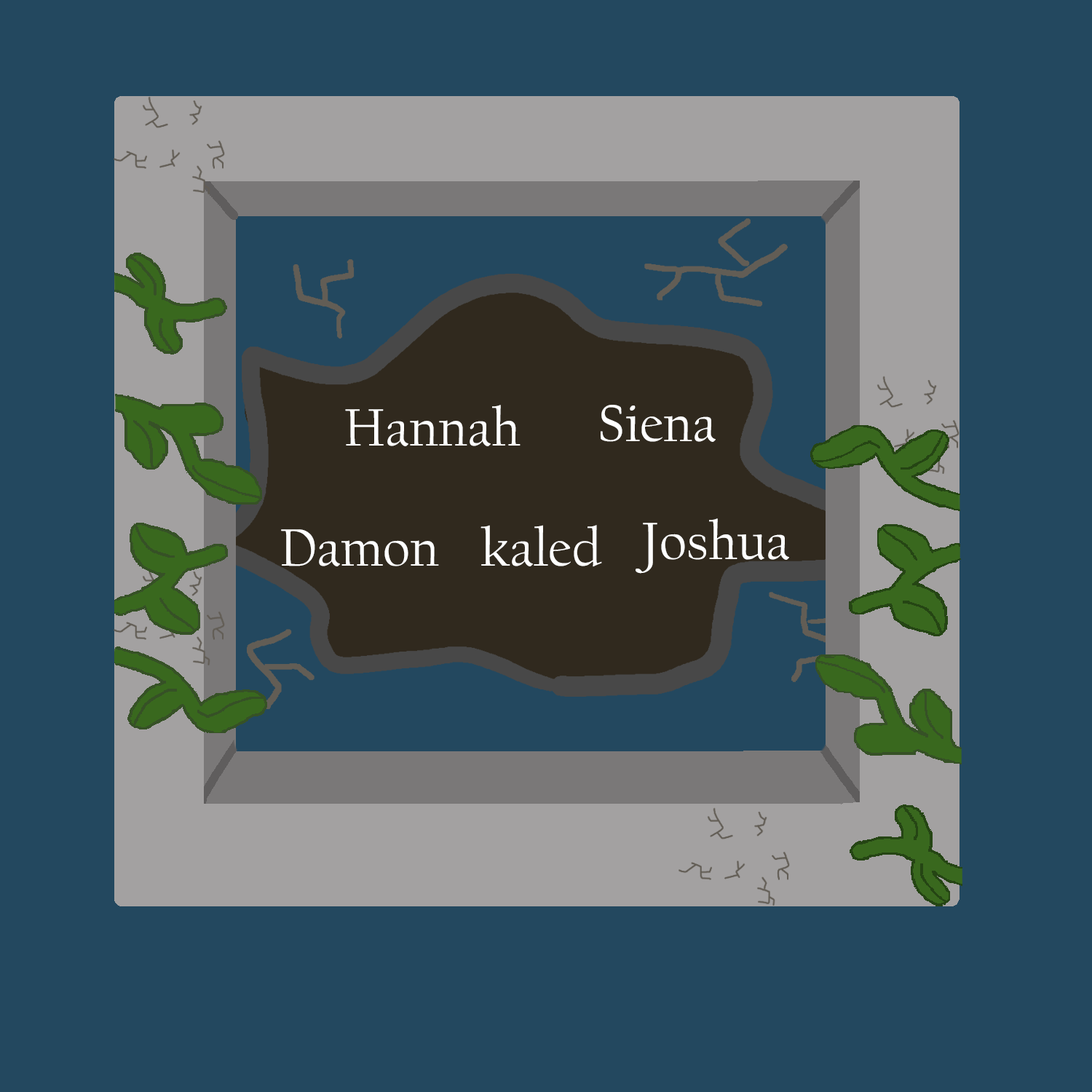
<style>
.page{position:relative;width:1092px;height:1092px;background:#23485f}
.page>*{position:absolute;margin:0}
.t1{font:54.6px "CalifornianFB-Reg";color:#ffffff}
</style>
<div class="page">
<p class="t1" style="left:345px;top:405px;width:176px;height:41px">Hannah</p>
<p class="t1" style="left:601px;top:405px;width:115px;height:37px">Siena</p>
<p class="t1" style="left:636px;top:518px;width:153px;height:56px">Joshua</p>
<p class="t1" style="left:281px;top:529px;width:158px;height:37px">Damon</p>
<p class="t1" style="left:480px;top:525px;width:122px;height:42px">kaled</p>
</div>
